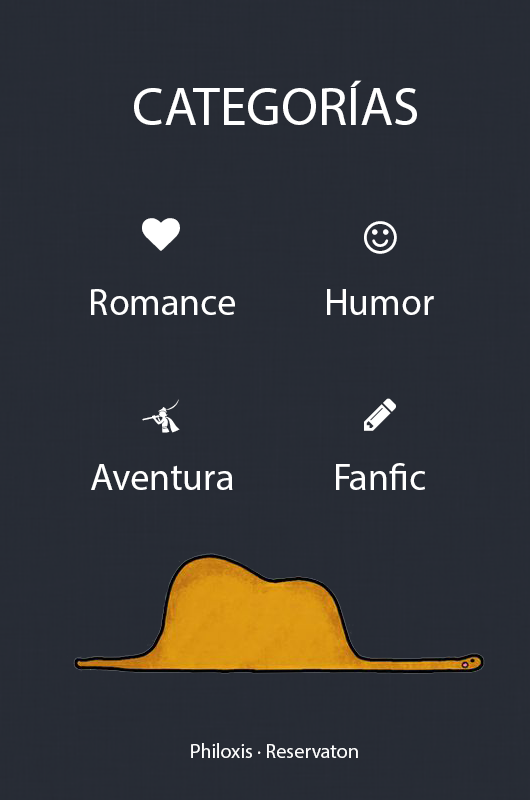
<style>
.page{position:relative;width:530px;height:800px;background:#272c35}
.page>*{position:absolute;margin:0}
.t1{font:53.9px "MyriadPro-Regular";color:#ffffff}
.t2{font:37.9px "MyriadPro-Regular";color:#ffffff}
.t3{font:19.9px "MyriadPro-Regular";color:#ffffff}
</style>
<div class="page">
<p class="t1" style="left:134px;top:80px;width:283px;height:45px">CATEGORÍAS</p>
<p class="t2" style="left:91px;top:289px;width:144px;height:26px">Romance</p>
<p class="t2" style="left:327px;top:289px;width:107px;height:26px">Humor</p>
<p class="t2" style="left:91px;top:464px;width:142px;height:26px">Aventura</p>
<p class="t2" style="left:336px;top:463px;width:89px;height:27px">Fanfic</p>
<p class="t3" style="left:191px;top:743px;width:167px;height:15px">Philoxis · Reservaton</p>
</div>
